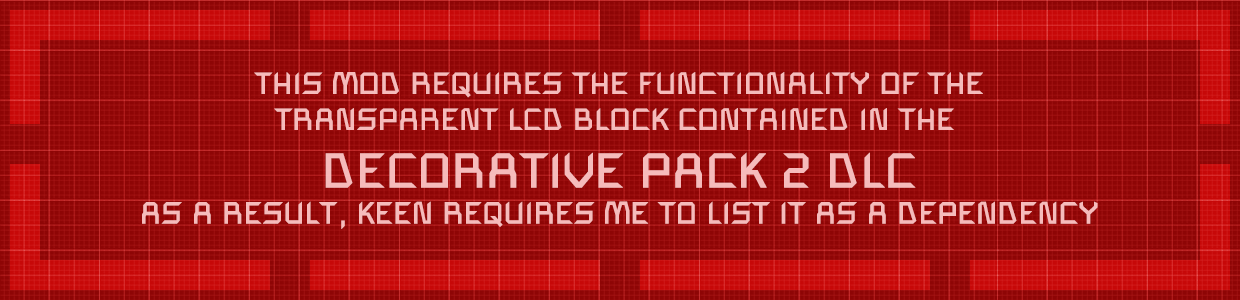
<style>
.page{position:relative;width:1240px;height:300px;background:#8e0505}
.page>*{position:absolute;margin:0}
.t1{font:30px "SpaceEngineers";color:#ffc8c8;font-weight:bold}
.t2{font:48px "SpaceEngineers";color:#ffc8c8;font-weight:bold}
</style>
<div class="page">
<p class="t1" style="left:142px;top:72px;width:956px;height:157px;text-align:center;opacity:0.9">THIS MOD REQUIRES THE FUNCTIONALITY OF THE<br>TRANSPARENT LCD BLOCK CONTAINED IN THE <br><span class="t2">DECORATIVE PACK 2 DLC<br></span>AS A RESULT, KEEN REQUIRES ME TO LIST IT AS A DEPENDENCY</p>
</div>
